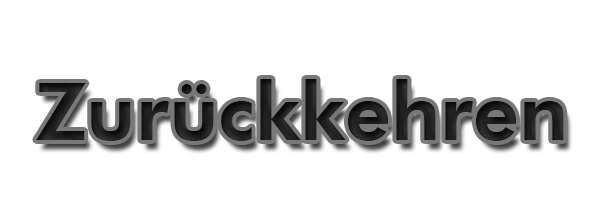
<style>
.page{position:relative;width:600px;height:200px;background:#ffffff}
.page>*{position:absolute;margin:0}
.t1{font:80px "FuturaBT-Heavy";color:#1e1e1e}
</style>
<div class="page">
<p class="t1" style="left:36px;top:79px;width:528px;height:62px">Zurückkehren</p>
</div>
